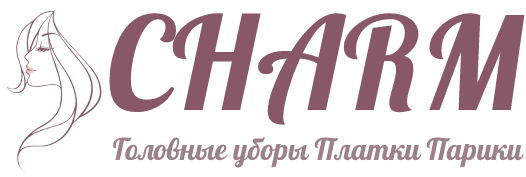
<style>
.page{position:relative;width:526px;height:177px;background:#ffffff}
.page>*{position:absolute;margin:0}
.t1{font:129px "Pattaya-Regular";color:#885868}
.t2{font:30px "Pattaya-Regular";color:#9c818a}
</style>
<div class="page">
<p class="t1" style="left:109px;top:13px;width:416px;height:112px">CHARM</p>
<p class="t2" style="left:113px;top:137px;width:411px;height:31px">Головные уборы Платки Парики</p>
</div>
